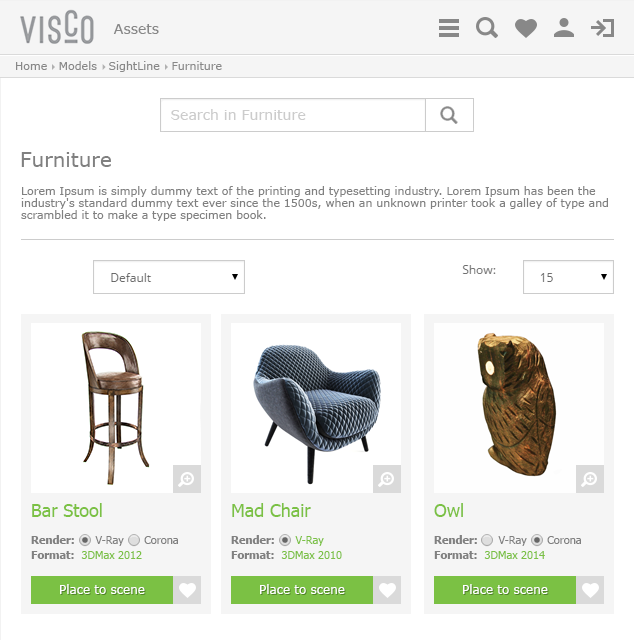
<style>
.page{position:relative;width:634px;height:640px;background:#ffffff}
.page>*{position:absolute;margin:0}
.t1{font:14px "Verdana";color:#888888}
.t2{font:11px "Verdana";color:#888888}
.t3{font:14px "Verdana";color:#cccccc}
.t4{font:20px "Verdana";color:#808080}
.t5{font:11px/12px "Verdana";color:#808080}
.t6{font:18px "Tahoma";color:#7bc144}
.t7{font:11px/12px "Tahoma";color:#808080}
.t8{font:11px/12px "Tahoma-Bold";color:#808080}
.t9{font:11px/15px "Tahoma-Bold";color:#808080}
.t10{font:11px/15px "Tahoma";color:#7bc144}
.t11{font:11px/12px "Tahoma";color:#7bc144}
.t12{font:12px "Verdana";color:#ffffff}
</style>
<div class="page">
<p class="t1" style="left:113px;top:24px;width:46px;height:10px">Assets</p>
<p class="t2" style="left:16px;top:61px;width:206px;height:11px">Home   Models   SightLine   Furniture</p>
<p class="t3" style="left:171px;top:109px;width:135px;height:11px">Search in Furniture</p>
<p class="t4" style="left:21px;top:152px;width:90px;height:15px">Furniture</p>
<p class="t5" style="left:21px;top:186px;width:587px;height:35px">Lorem Ipsum is simply dummy text of the printing and typesetting industry. Lorem Ipsum has been the industry's standard dummy text ever since the 1500s, when an unknown printer took a galley of type and scrambled it to make a type specimen book.</p>
<p class="t6" style="left:32px;top:503px;width:70px;height:14px">Bar Stool</p>
<p class="t6" style="left:232px;top:503px;width:79px;height:14px">Mad Chair</p>
<p class="t6" style="left:434px;top:503px;width:29px;height:14px">Owl</p>
<p class="t7" style="left:31px;top:535px;width:147px;height:24px"><span class="t8">Render:</span>      V-Ray      Corona<br><span class="t9">Format:  </span><span class="t10">3DMax 2012</span></p>
<p class="t10" style="left:231px;top:535px;width:111px;height:24px"><span class="t8">Render:      </span><span class="t11">V-Ray<br></span><span class="t9">Format:  </span>3DMax 2010</p>
<p class="t7" style="left:434px;top:535px;width:147px;height:24px"><span class="t8">Render:</span>      V-Ray      Corona<br><span class="t9">Format:  </span><span class="t10">3DMax 2014</span></p>
<p class="t12" style="left:60px;top:584px;width:85px;height:10px">Place to scene</p>
<p class="t12" style="left:260px;top:584px;width:85px;height:10px">Place to scene</p>
<p class="t12" style="left:463px;top:584px;width:85px;height:10px">Place to scene</p>
</div>
